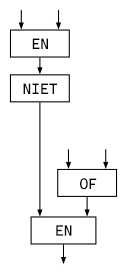
<style>
.page{position:relative;width:127px;height:275px;background:#ffffff}
.page>*{position:absolute;margin:0}
.t1{font:14.9px "CascadiaCode";color:#000000}
</style>
<div class="page">
<p class="t1" style="left:32px;top:38px;width:16px;height:11px">EN</p>
<p class="t1" style="left:23px;top:83px;width:34px;height:11px">NIET</p>
<p class="t1" style="left:80px;top:178px;width:17px;height:12px">OF</p>
<p class="t1" style="left:56px;top:225px;width:16px;height:11px">EN</p>
</div>
